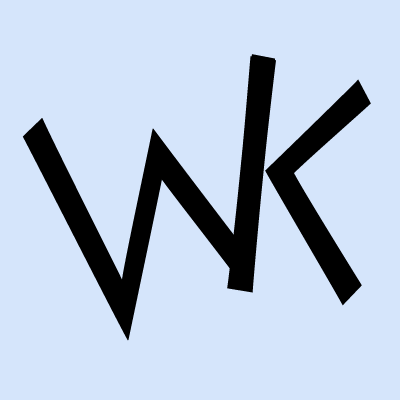
<style>
.page{position:relative;width:400px;height:400px;background:#d5e5fb}
.page>*{position:absolute;margin:0}
.t1{font:321.1px "LithosPro-Regular";color:#000000;scale:0.81 1}
.t2{font:323.8px "LithosPro-Regular";color:#000000;scale:0.79 1}
</style>
<div class="page">
<p class="t1" style="left:22px;top:54px;width:253px;height:287px;rotate:-18deg">W</p>
<p class="t2" style="left:227px;top:56px;width:144px;height:250px;rotate:9deg">K</p>
</div>
